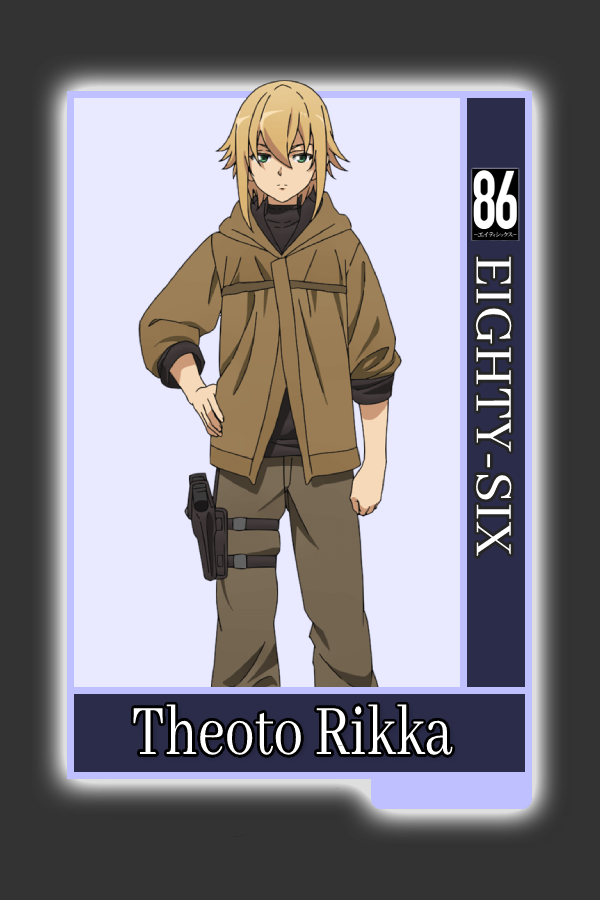
<style>
.page{position:relative;width:600px;height:900px;background:#e9e9ff}
.page>*{position:absolute;margin:0}
.t1{font:58.2px "AbhayaLibre-Regular";color:#ffffff}
.t2{font:78.1px "AbhayaLibre-Regular";color:#ffffff;scale:0.76 1}
</style>
<div class="page">
<p class="t1" style="left:476px;top:256px;width:36px;height:300px;rotate:90deg">EIGHTY-SIX</p>
<p class="t2" style="left:133px;top:704px;width:320px;height:51px">Theoto Rikka</p>
</div>
